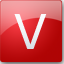
<style>
.page{position:relative;width:64px;height:64px}
.page>*{position:absolute;margin:0}
.t1{font:48px "Verdana";color:#f8fafc}
</style>
<div class="page">
<p class="t1" style="left:14px;top:14px;width:33px;height:35px">V</p>
</div>
